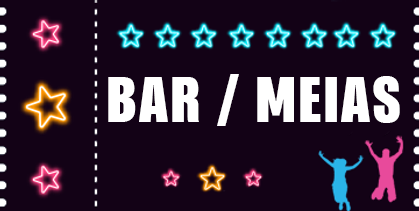
<style>
.page{position:relative;width:419px;height:211px;background:#130216}
.page>*{position:absolute;margin:0}
.t1{font:60px "PFFusionSansPro-Black";letter-spacing:0.02em;color:#ffffff}
</style>
<div class="page">
<p class="t1" style="left:108px;top:74px;width:292px;height:52px">BAR / MEIAS</p>
</div>
